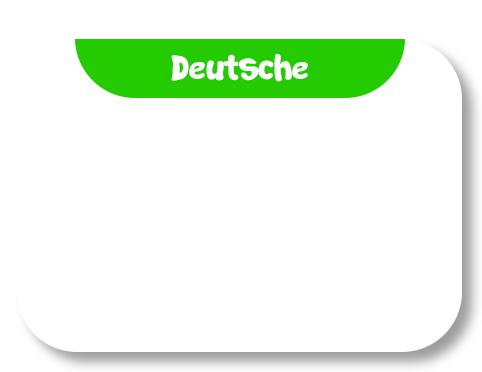
<style>
.page{position:relative;width:482px;height:372px;background:#ffffff}
.page>*{position:absolute;margin:0}
.t1{font:34px "SoftMarshmallow";color:#fffefe}
</style>
<div class="page">
<p class="t1" style="left:171px;top:53px;width:137px;height:29px">Deutsche</p>
</div>
